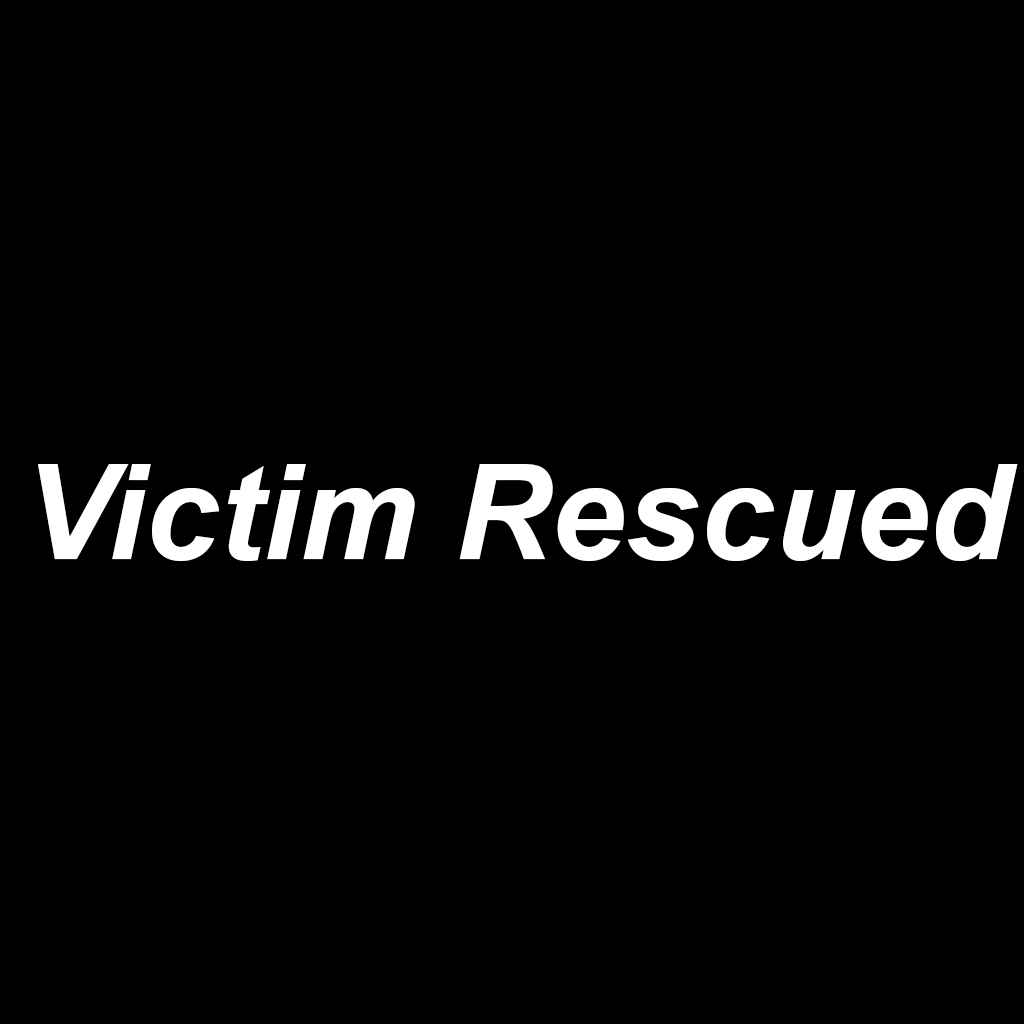
<style>
.page{position:relative;width:1024px;height:1024px;background:#000000}
.page>*{position:absolute;margin:0}
.t1{font:133.1px "Arial-BoldItalicMT";color:#ffffff}
</style>
<div class="page">
<p class="t1" style="left:38px;top:464px;width:980px;height:97px">Victim Rescued</p>
</div>
